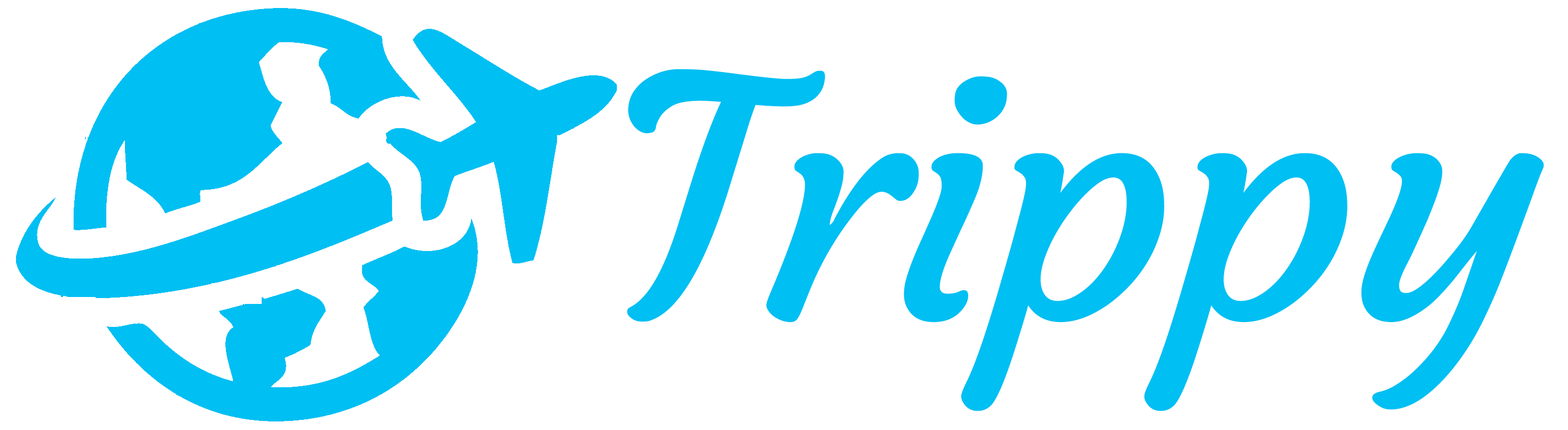
<style>
.page{position:relative;width:1568px;height:430px;background:#ffffff}
.page>*{position:absolute;margin:0}
.t1{font:330.8px "Courgette-Regular";letter-spacing:-0.025em;color:#00bff3;scale:1.05 1}
</style>
<div class="page">
<p class="t1" style="left:627px;top:69px;width:917px;height:342px">Trippy</p>
</div>
